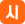
<style>
.page{position:relative;width:25px;height:24px;background:#ff6813}
.page>*{position:absolute;margin:0}
.t1{font:15px "S-CoreDream-6Bold";letter-spacing:0.02em;color:#ffffff;scale:0.96 1}
</style>
<div class="page">
<p class="t1" style="left:6px;top:5px;width:12px;height:15px">시</p>
</div>
